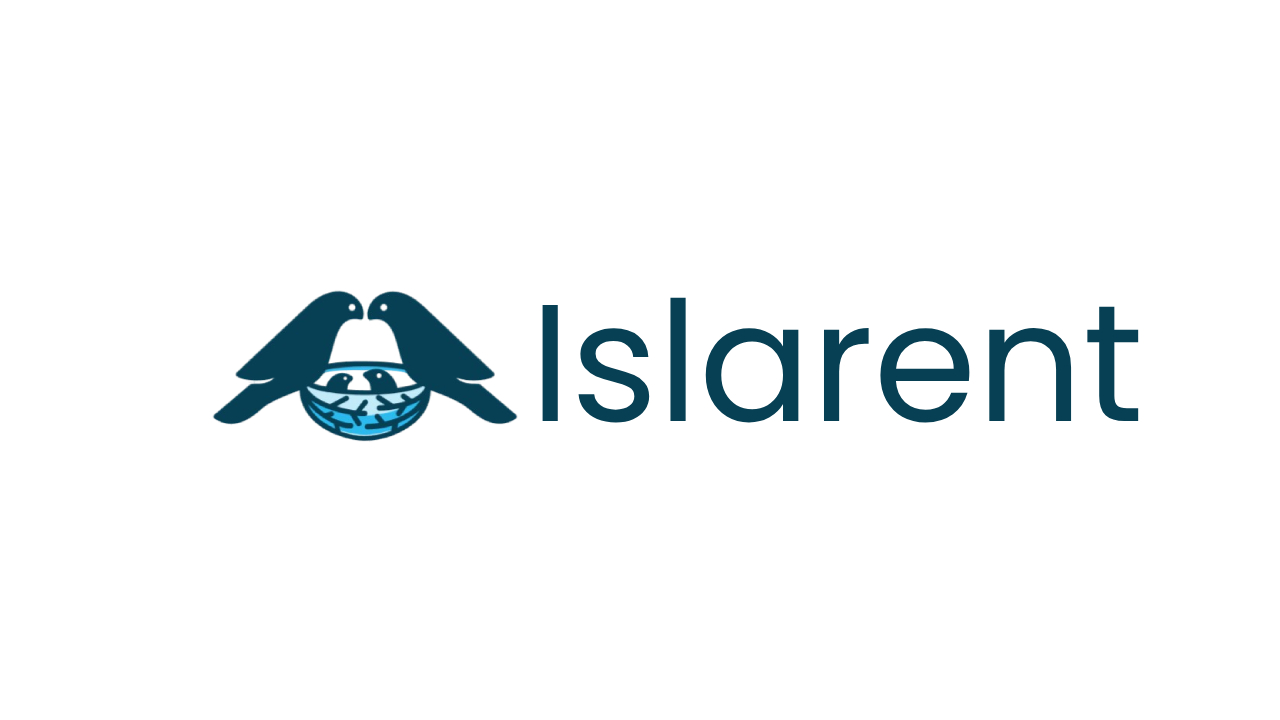
<style>
.page{position:relative;width:1280px;height:720px;background:#ffffff}
.page>*{position:absolute;margin:0}
.t1{font:166.5px "Poppins-Regular";color:#074054}
</style>
<div class="page">
<p class="t1" style="left:542px;top:297px;width:597px;height:126px">Islarent</p>
</div>
